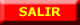
<style>
.page{position:relative;width:80px;height:25px;background:#ff0000}
.page>*{position:absolute;margin:0}
.t1{font:12px "Verdana-Bold";color:#ffff00}
</style>
<div class="page">
<p class="t1" style="left:19px;top:7px;width:42px;height:10px">SALIR</p>
</div>
